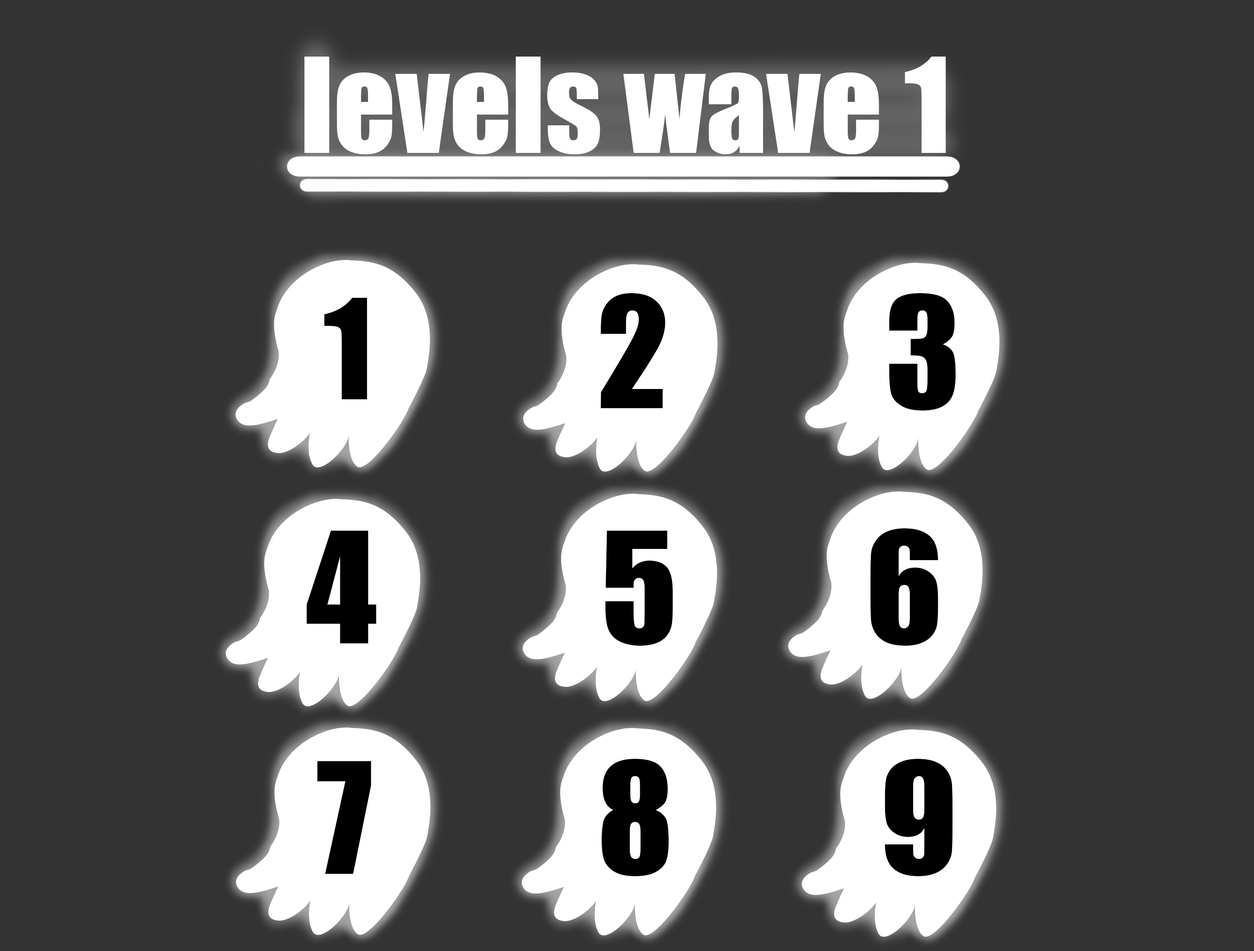
<style>
.page{position:relative;width:1254px;height:951px;background:#333333}
.page>*{position:absolute;margin:0}
.t1{font:121.9px "Impact";color:#ffffff}
.t2{font:142.8px "Impact";color:#000000}
.t3{font:128.2px "Impact";color:#010101}
</style>
<div class="page">
<p class="t1" style="left:304px;top:57px;width:642px;height:97px">levels wave 1</p>
<p class="t2" style="left:600px;top:293px;width:65px;height:115px">2</p>
<p class="t2" style="left:889px;top:293px;width:67px;height:117px">3</p>
<p class="t3" style="left:324px;top:298px;width:43px;height:101px">1</p>
<p class="t2" style="left:306px;top:531px;width:70px;height:112px">4</p>
<p class="t2" style="left:605px;top:531px;width:68px;height:115px">5</p>
<p class="t2" style="left:870px;top:528px;width:68px;height:118px">6</p>
<p class="t2" style="left:317px;top:761px;width:54px;height:113px">7</p>
<p class="t2" style="left:601px;top:759px;width:68px;height:117px">8</p>
<p class="t2" style="left:885px;top:759px;width:68px;height:117px">9</p>
</div>
